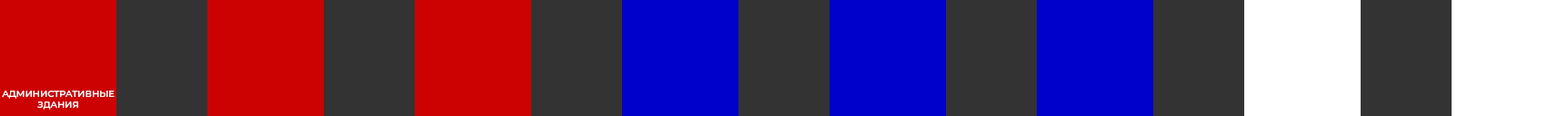
<style>
.page{position:relative;width:1568px;height:116px;background:#333333}
.page>*{position:absolute;margin:0}
.t1{font:9.1px "Montserrat-Medium";color:#ffffff}
</style>
<div class="page">
<p class="t1" style="left:2px;top:91px;width:113px;height:19px;text-align:center">АДМИНИСТРАТИВНЫЕ ЗДАНИЯ</p>
</div>
